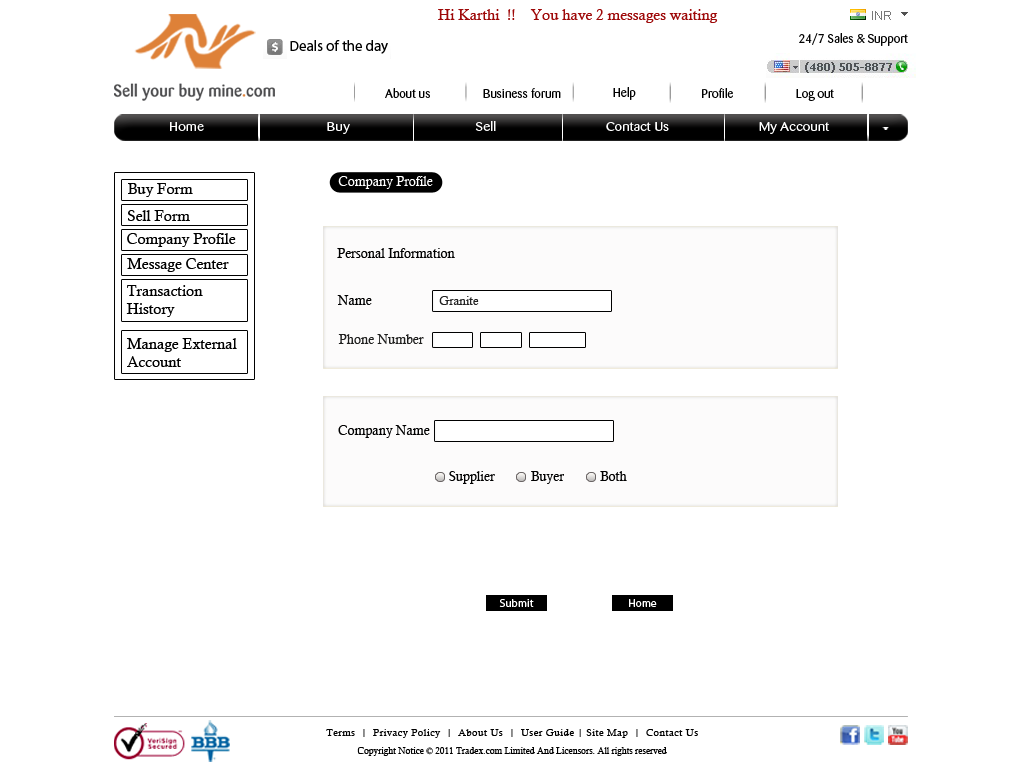
<style>
.page{position:relative;width:1024px;height:768px;background:#ffffff}
.page>*{position:absolute;margin:0}
.t1{font:15px "CalistoMT";color:#9e0909}
.t2{font:14.9px "MyriadPro-Regular";color:#000000}
.t3{font:12px "Barmeno-Regular";color:#030303;scale:1.05 1}
.t4{font:12px "Barmeno-Regular";color:#000000;scale:1.05 1}
.t5{font:12.1px "Barmeno-Regular";color:#ffffff;scale:1.2 1}
.t6{font:15px "CalistoMT";color:#000000}
.t7{font:13px "CalistoMT";color:#ffffff}
.t8{font:13px "CalistoMT";color:#010101}
.t9{font:12px "CalistoMT";color:#222222}
.t10{font:13px "CalistoMT";color:#20201f}
.t11{font:11px "MyriadPro-Regular";color:#ffffff}
.t12{font:10px/18px "CalistoMT";letter-spacing:0.045em;color:#000000}
.t13{font:9px/18px "CalistoMT";color:#000000}
</style>
<div class="page">
<p class="t1" style="left:438px;top:9px;width:280px;height:14px">Hi Karthi  !!    You have 2 messages waiting</p>
<p class="t2" style="left:290px;top:40px;width:98px;height:14px">Deals of the day</p>
<p class="t3" style="left:799px;top:33px;width:109px;height:13px">24/7 Sales &amp; Support</p>
<p class="t4" style="left:385px;top:88px;width:45px;height:10px">About us</p>
<p class="t4" style="left:483px;top:88px;width:78px;height:10px">Business forum</p>
<p class="t4" style="left:613px;top:87px;width:23px;height:13px">Help</p>
<p class="t4" style="left:702px;top:88px;width:31px;height:10px">Profile</p>
<p class="t4" style="left:796px;top:89px;width:38px;height:12px">Log out</p>
<p class="t5" style="left:170px;top:121px;width:660px;height:13px">Home                                     Buy                                      Sell                                 Contact Us                           My Account</p>
<p class="t6" style="left:128px;top:183px;width:65px;height:14px">Buy Form</p>
<p class="t7" style="left:338px;top:176px;width:95px;height:13px">Company Profile</p>
<p class="t6" style="left:128px;top:210px;width:62px;height:11px">Sell Form</p>
<p class="t6" style="left:127px;top:233px;width:109px;height:14px">Company Profile</p>
<p class="t8" style="left:337px;top:248px;width:118px;height:10px">Personal Information</p>
<p class="t6" style="left:127px;top:258px;width:102px;height:14px">Message Center</p>
<p class="t6" style="left:126px;top:285px;width:77px;height:32px">Transaction<br>History</p>
<p class="t8" style="left:337px;top:295px;width:35px;height:10px">Name</p>
<p class="t9" style="left:439px;top:296px;width:40px;height:9px">Granite</p>
<p class="t6" style="left:127px;top:338px;width:110px;height:29px">Manage External<br>Account</p>
<p class="t10" style="left:338px;top:334px;width:86px;height:10px">Phone Number</p>
<p class="t8" style="left:338px;top:425px;width:92px;height:13px">Company Name</p>
<p class="t8" style="left:449px;top:471px;width:178px;height:13px">Supplier           Buyer           Both</p>
<p class="t11" style="left:499px;top:599px;width:35px;height:8px">Submit</p>
<p class="t11" style="left:629px;top:599px;width:28px;height:8px">Home</p>
<p class="t12" style="left:326px;top:729px;width:372px;height:27px;text-align:center">Terms  |  Privacy Policy  |  About Us  |  User Guide | Site Map  |  Contact Us<br><span class="t13">Copyright Notice © 2011 Tradex.com Limited And Licensors. All rights reserved</span></p>
</div>
